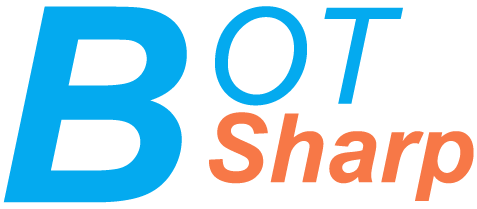
<style>
.page{position:relative;width:477px;height:209px;background:#ffffff}
.page>*{position:absolute;margin:0}
.t1{font:273.1px "Arial-BoldItalicMT";color:#04aaef}
.t2{font:133.7px "Arial-ItalicMT";color:#04aaef}
.t3{font:95.6px "Arial-BoldItalicMT";color:#f77847}
</style>
<div class="page">
<p class="t1" style="left:3px;top:6px;width:184px;height:197px">B</p>
<p class="t2" style="left:215px;top:6px;width:188px;height:100px">OT</p>
<p class="t3" style="left:209px;top:112px;width:265px;height:89px">Sharp</p>
</div>
